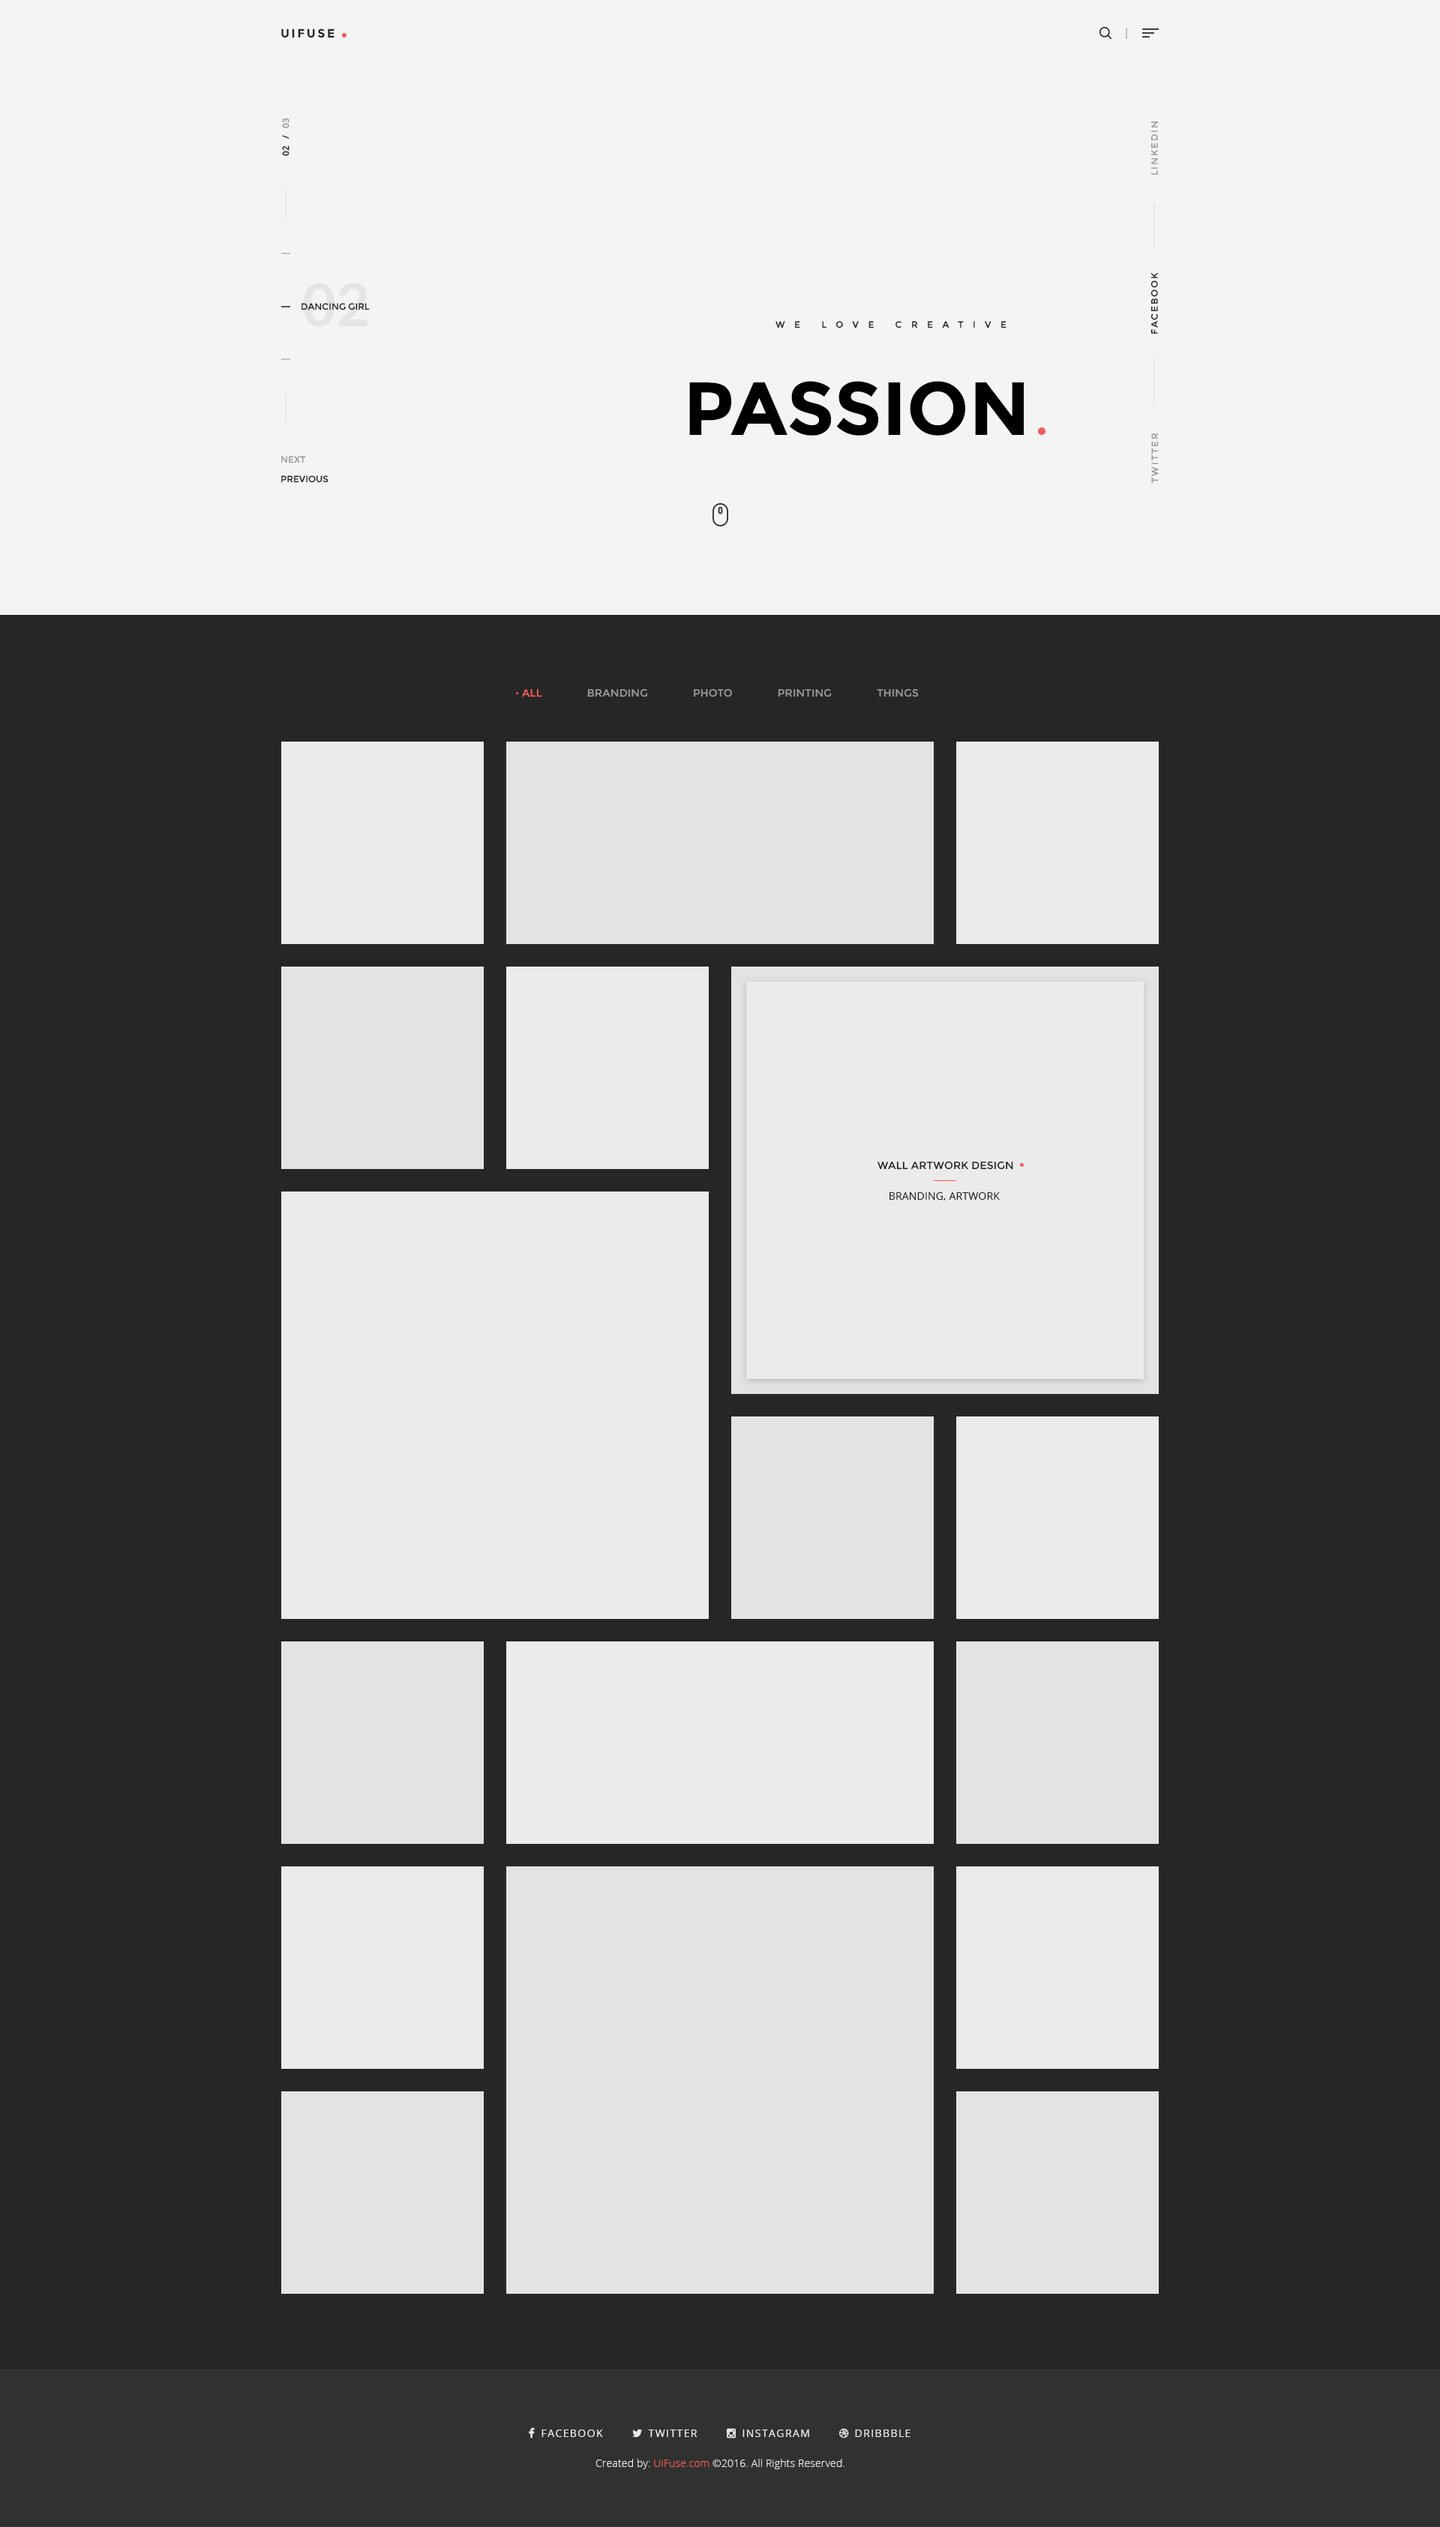
<style>
.page{position:relative;width:1440px;height:2527px;background:#262626}
.page>*{position:absolute;margin:0}
.t1{font:12px "Montserrat-Bold";letter-spacing:0.16em;color:#212121;text-transform:uppercase}
.t2{font:9px "OpenSans-Semibold";color:#212121;text-transform:uppercase}
.t3{font:9px "OpenSans-Semibold";color:#999999;text-transform:uppercase}
.t4{font:9px "Montserrat-Regular";letter-spacing:0.16em;color:#999999;text-transform:uppercase}
.t5{font:9px "Montserrat-Regular";letter-spacing:0.16em;color:#212121;text-transform:uppercase}
.t6{font:9px "Montserrat-Regular";color:#212121;text-transform:uppercase}
.t7{font:9px "Montserrat-Regular";letter-spacing:1.04em;color:#212121;text-transform:uppercase}
.t8{font:75px "Montserrat-Bold";color:#000000;text-transform:uppercase}
.t9{font:9px/19.5px "Montserrat-Regular";color:#212121;text-transform:uppercase}
.t10{font:9px/19.5px "Montserrat-Regular";color:#999999;text-transform:uppercase}
.t11{font:10.5px "Montserrat-Regular";letter-spacing:0.012em;color:#999999;text-transform:uppercase}
.t12{font:10.5px "Montserrat-Regular";letter-spacing:0.012em;color:#f15c58;text-transform:uppercase}
.t13{font:10.5px "Montserrat-Regular";letter-spacing:0.012em;color:#212121;text-transform:uppercase}
.t14{font:10.5px "OpenSans";letter-spacing:0.012em;color:#212121;text-transform:uppercase}
.t15{font:10.5px "OpenSans-Light";letter-spacing:0.012em;color:#eaeaea}
.t16{font:10.5px "OpenSans-Light";letter-spacing:0.012em;color:#f15c58}
</style>
<div class="page">
<p class="t1" style="left:281px;top:28px;width:53px;height:10px">UiFuse</p>
<p class="t2" style="left:282px;top:118px;width:7px;height:38px;rotate:-90deg">02   /  <span class="t3"> 03</span></p>
<p class="t4" style="left:1150px;top:121px;width:8px;height:54px;rotate:-90deg">Linkedin</p>
<p class="t5" style="left:1150px;top:272px;width:8px;height:62px;rotate:-90deg">Facebook</p>
<p class="t6" style="left:301px;top:303px;width:69px;height:7px">Dancing Girl</p>
<p class="t7" style="left:775px;top:321px;width:231px;height:7px">We love creative</p>
<p class="t8" style="left:689px;top:381px;width:335px;height:55px">Passion</p>
<p class="t4" style="left:1151px;top:433px;width:8px;height:50px;rotate:-90deg">Twitter</p>
<p class="t9" style="left:281px;top:456px;width:47px;height:27px"><span class="t10">Next<br></span>Previous</p>
<p class="t11" style="left:522px;top:688px;width:397px;height:9px"><span class="t12">All</span>               Branding               photo               printing               things</p>
<p class="t13" style="left:877px;top:1161px;width:136px;height:9px">Wall Artwork Design</p>
<p class="t14" style="left:889px;top:1192px;width:111px;height:9px">Branding, Artwork</p>
<p class="t15" style="left:595px;top:2459px;width:249px;height:10px">Created by: <span class="t16">UiFuse.com</span> ©2016. All Rights Reserved.</p>
</div>
